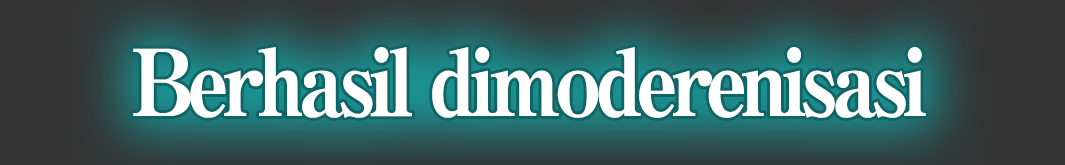
<style>
.page{position:relative;width:1065px;height:165px}
.page>*{position:absolute;margin:0}
.t1{font:92px "RyuminPro-Heavy";letter-spacing:-0.08em;color:#ffffff;scale:0.9 1}
</style>
<div class="page">
<p class="t1" style="left:133px;top:47px;width:793px;height:71px">Berhasil dimoderenisasi</p>
</div>
